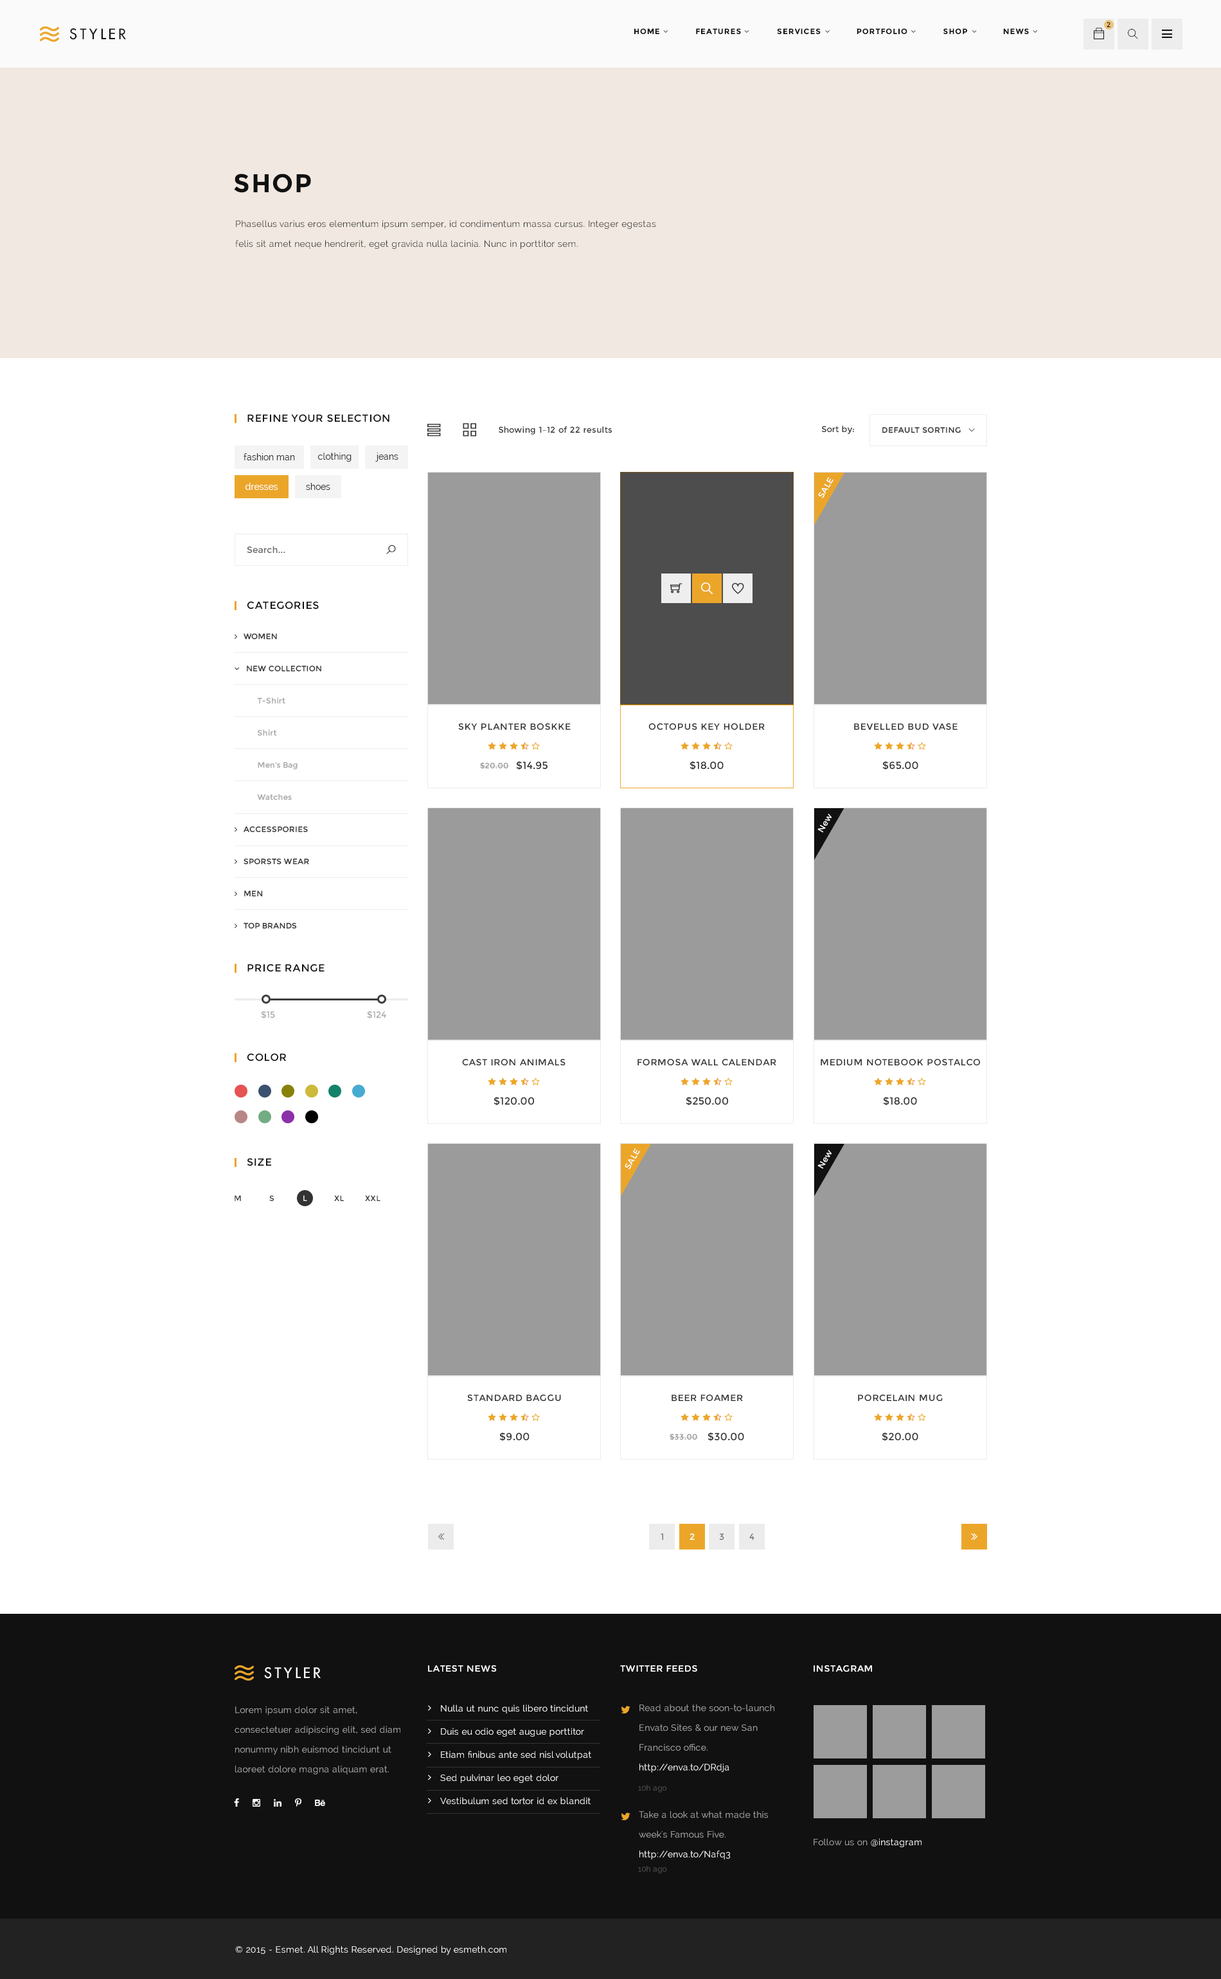
<style>
.page{position:relative;width:1221px;height:1979px;background:#ffffff}
.page>*{position:absolute;margin:0}
.t1{font:14.1px "FuturaLT";letter-spacing:0.2em;color:#111111;text-transform:uppercase}
.t2{font:7.7px "Montserrat-Bold";letter-spacing:0.075em;color:#111111;text-transform:uppercase}
.t3{font:7.1px "Montserrat-Regular";letter-spacing:0.075em;color:#111111;text-transform:uppercase}
.t4{font:25.7px "Montserrat-Bold";letter-spacing:0.05em;color:#111111;text-transform:uppercase}
.t5{font:9px/19.8px "Raleway";letter-spacing:0.02em;color:#333333}
.t6{font:10.3px "Montserrat-Regular";letter-spacing:0.05em;color:#111111;text-transform:uppercase}
.t7{font:8.4px "Montserrat-Regular";letter-spacing:0.02em;color:#333333}
.t8{font:7.7px "Montserrat-Regular";letter-spacing:0.05em;color:#333333;text-transform:uppercase}
.t9{font:9px "Raleway";color:#333333}
.t10{font:9px "Raleway";color:#ffffff}
.t11{font:8.4px "Montserrat-Regular";letter-spacing:0.02em;color:#ffffff}
.t12{font:9px "Montserrat-Regular";color:#666666}
.t13{font:9px "Montserrat-Regular";letter-spacing:0.05em;color:#333333;text-transform:uppercase}
.t14{font:10.3px "Montserrat-Regular";letter-spacing:0.02em;color:#333333;text-transform:uppercase}
.t15{font:7.7px "Montserrat-Regular";letter-spacing:0.05em;color:#929292;text-transform:uppercase}
.t16{font:9px "Montserrat-Regular";color:#a9a9a9}
.t17{font:7.7px "Montserrat-Regular";letter-spacing:0.05em;color:#ffffff;text-transform:uppercase}
.t18{font:9px "Montserrat-Regular";letter-spacing:0.05em;color:#777777;text-transform:uppercase}
.t19{font:9px "Montserrat-Regular";letter-spacing:0.05em;color:#ffffff;text-transform:uppercase}
.t20{font:14.1px "FuturaLT";letter-spacing:0.2em;color:#ffffff;text-transform:uppercase}
.t21{font:9px/19.8px "Raleway";letter-spacing:0.02em;color:#a9a9a9}
.t22{font:9px/23.1px "Raleway";letter-spacing:0.02em;color:#ffffff}
.t23{font:9px/19.8px "Raleway";letter-spacing:0.02em;color:#ffffff}
.t24{font:7.7px "Raleway";letter-spacing:0.02em;color:#545454}
.t25{font:9px "Raleway";letter-spacing:0.02em;color:#a9a9a9}
.t26{font:9px "Raleway";letter-spacing:0.02em;color:#ffffff}
</style>
<div class="page">
<p class="t1" style="left:69px;top:28px;width:57px;height:12px">styler</p>
<p class="t2" style="left:634px;top:28px;width:395px;height:6px">HOME              FEATURES              SERVICES              portfolio              SHOP              NEWS</p>
<p class="t3" style="left:1107px;top:22px;width:4px;height:6px">2</p>
<p class="t4" style="left:234px;top:174px;width:77px;height:19px">Shop</p>
<p class="t5" style="left:235px;top:220px;width:421px;height:29px">Phasellus varius eros elementum ipsum semper, id condimentum massa cursus. Integer egestas felis sit amet neque hendrerit, eget gravida nulla lacinia. Nunc in porttitor sem.</p>
<p class="t6" style="left:248px;top:414px;width:142px;height:8px">refine your selection</p>
<p class="t7" style="left:822px;top:426px;width:32px;height:8px">Sort by:</p>
<p class="t7" style="left:499px;top:426px;width:113px;height:9px">Showing 1–12 of 22 results</p>
<p class="t8" style="left:883px;top:427px;width:78px;height:6px">Default sorting</p>
<p class="t9" style="left:244px;top:453px;width:51px;height:7px">fashion man</p>
<p class="t9" style="left:318px;top:453px;width:34px;height:9px">clothing</p>
<p class="t9" style="left:375px;top:453px;width:24px;height:9px">jeans</p>
<p class="t10" style="left:245px;top:483px;width:33px;height:7px">dresses</p>
<p class="t9" style="left:306px;top:483px;width:24px;height:7px">shoes</p>
<p class="t11" style="left:818px;top:477px;width:16px;height:21px;rotate:-60deg">SALE</p>
<p class="t12" style="left:247px;top:546px;width:38px;height:7px">Search...</p>
<p class="t6" style="left:247px;top:601px;width:72px;height:8px">categories</p>
<p class="t13" style="left:458px;top:723px;width:113px;height:7px">Sky Planter Boskke</p>
<p class="t13" style="left:649px;top:723px;width:116px;height:7px">Octopus Key Holder</p>
<p class="t13" style="left:854px;top:723px;width:104px;height:7px">Bevelled Bud Vase</p>
<p class="t14" style="left:516px;top:761px;width:32px;height:9px">$14.95</p>
<p class="t14" style="left:690px;top:761px;width:34px;height:9px">$18.00</p>
<p class="t14" style="left:883px;top:761px;width:36px;height:9px">$65.00</p>
<p class="t15" style="left:480px;top:762px;width:29px;height:7px">$20.00</p>
<p class="t11" style="left:818px;top:813px;width:14px;height:20px;rotate:-60deg">New</p>
<p class="t6" style="left:248px;top:964px;width:77px;height:8px">price range</p>
<p class="t16" style="left:261px;top:1011px;width:14px;height:7px">$15</p>
<p class="t16" style="left:367px;top:1011px;width:19px;height:7px">$124</p>
<p class="t6" style="left:247px;top:1053px;width:40px;height:8px">color</p>
<p class="t13" style="left:462px;top:1059px;width:104px;height:6px">Cast Iron Animals</p>
<p class="t13" style="left:638px;top:1059px;width:139px;height:6px">Formosa Wall Calendar</p>
<p class="t13" style="left:821px;top:1059px;width:159px;height:6px">Medium Notebook Postalco</p>
<p class="t14" style="left:494px;top:1097px;width:40px;height:9px">$120.00</p>
<p class="t14" style="left:686px;top:1097px;width:42px;height:9px">$250.00</p>
<p class="t14" style="left:883px;top:1097px;width:34px;height:9px">$18.00</p>
<p class="t6" style="left:247px;top:1158px;width:24px;height:8px">size</p>
<p class="t11" style="left:625px;top:1148px;width:15px;height:21px;rotate:-60deg">SALE</p>
<p class="t11" style="left:818px;top:1149px;width:14px;height:20px;rotate:-60deg">New</p>
<p class="t8" style="left:235px;top:1195px;width:6px;height:6px">M</p>
<p class="t8" style="left:269px;top:1195px;width:5px;height:6px">S</p>
<p class="t17" style="left:303px;top:1195px;width:4px;height:6px">L</p>
<p class="t8" style="left:334px;top:1195px;width:10px;height:6px">Xl</p>
<p class="t8" style="left:365px;top:1195px;width:16px;height:6px">xxl</p>
<p class="t13" style="left:467px;top:1394px;width:94px;height:7px">Standard Baggu</p>
<p class="t13" style="left:672px;top:1394px;width:71px;height:7px">Beer Foamer</p>
<p class="t13" style="left:858px;top:1394px;width:85px;height:7px">Porcelain Mug</p>
<p class="t14" style="left:500px;top:1432px;width:30px;height:9px">$9.00</p>
<p class="t15" style="left:670px;top:1434px;width:28px;height:6px">$33.00</p>
<p class="t14" style="left:708px;top:1432px;width:36px;height:9px">$30.00</p>
<p class="t14" style="left:882px;top:1432px;width:37px;height:9px">$20.00</p>
<p class="t18" style="left:661px;top:1533px;width:2px;height:7px">1</p>
<p class="t19" style="left:690px;top:1533px;width:5px;height:7px">2</p>
<p class="t18" style="left:719px;top:1533px;width:5px;height:7px">3</p>
<p class="t18" style="left:750px;top:1533px;width:5px;height:7px">4</p>
<p class="t20" style="left:264px;top:1667px;width:57px;height:12px">styler</p>
<p class="t19" style="left:428px;top:1665px;width:69px;height:6px">latest news</p>
<p class="t19" style="left:620px;top:1665px;width:78px;height:6px">twitter feeds</p>
<p class="t19" style="left:814px;top:1665px;width:58px;height:6px">instagram</p>
<p class="t21" style="left:235px;top:1706px;width:166px;height:68px">Lorem ipsum dolor sit amet, consectetuer adipiscing elit, sed diam nonummy nibh euismod tincidunt ut laoreet dolore magna aliquam erat.</p>
<p class="t22" style="left:440px;top:1704px;width:151px;height:101px">Nulla ut nunc quis libero tincidunt<br>Duis eu odio eget augue porttitor<br>Etiam finibus ante sed nisl volutpat<br>Sed pulvinar leo eget dolor<br>Vestibulum sed tortor id ex blandit</p>
<p class="t21" style="left:640px;top:1704px;width:135px;height:68px">Read about the soon-to-launch Envato Sites &amp; our new San Francisco office. <span class="t23">http://enva.to/DRdja</span></p>
<p class="t24" style="left:638px;top:1785px;width:29px;height:7px">10h ago</p>
<p class="t21" style="left:639px;top:1811px;width:129px;height:48px">Take a look at what made this week's Famous Five. <span class="t23">http://enva.to/Nafq3</span></p>
<p class="t25" style="left:814px;top:1838px;width:108px;height:9px">Follow us on <span class="t26">@instagram</span></p>
<p class="t24" style="left:638px;top:1866px;width:29px;height:7px">10h ago</p>
<p class="t26" style="left:235px;top:1945px;width:272px;height:10px">© 2015 - Esmet. All Rights Reserved. Designed by esmeth.com</p>
</div>
